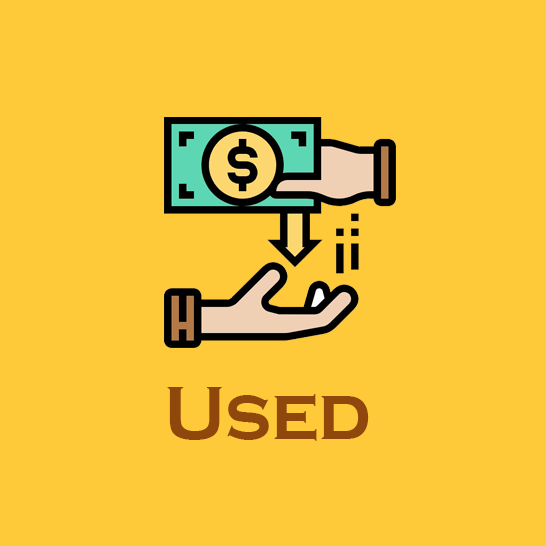
<style>
.page{position:relative;width:546px;height:546px;background:#feca3a}
.page>*{position:absolute;margin:0}
.t1{font:78px "CopperplateGothic-Bold";color:#90470b;scale:0.96 1}
</style>
<div class="page">
<p class="t1" style="left:167px;top:387px;width:202px;height:54px">Used</p>
</div>
